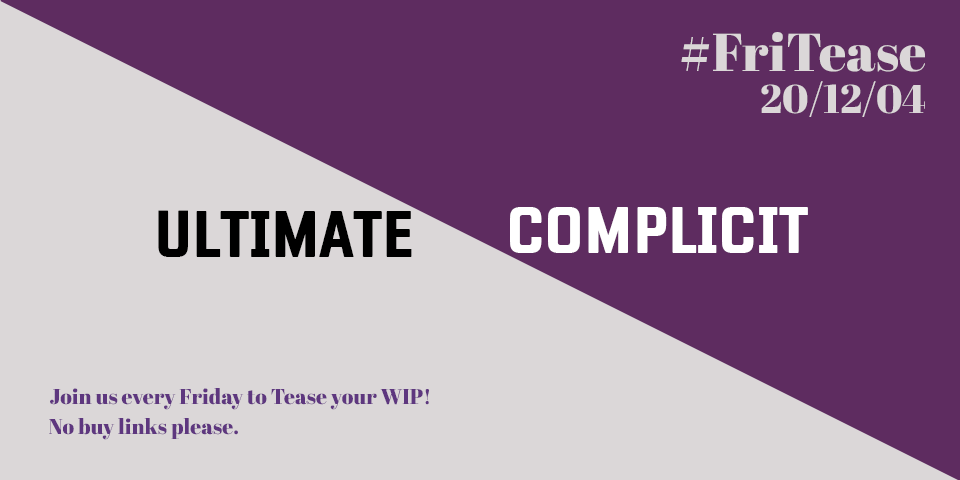
<style>
.page{position:relative;width:960px;height:480px;background:#dbd7d8}
.page>*{position:absolute;margin:0}
.t1{font:53.3px "AbrilFatface-Regular";color:#dbd7d8}
.t2{font:40px "AbrilFatface-Regular";color:#dbd7d8}
.t3{font:66.7px "Fragua-Bold";color:#ffffff}
.t4{font:66.7px "Fragua-Bold";color:#000000}
.t5{font:21.3px "AbrilFatface-Regular";color:#5e377f}
</style>
<div class="page">
<p class="t1" style="left:681px;top:32px;width:244px;height:40px">#FriTease</p>
<p class="t2" style="left:761px;top:81px;width:164px;height:36px">20/12/04</p>
<p class="t3" style="left:510px;top:207px;width:298px;height:46px">COMPLICIT</p>
<p class="t4" style="left:158px;top:210px;width:254px;height:47px">ULTIMATE</p>
<p class="t5" style="left:50px;top:388px;width:379px;height:22px">Join us every Friday to Tease your WIP!</p>
<p class="t5" style="left:49px;top:418px;width:189px;height:22px">No buy links please.</p>
</div>
